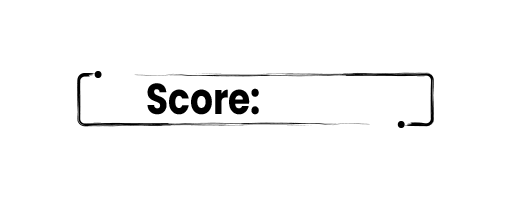
<style>
.page{position:relative;width:519px;height:199px;background:#ffffff}
.page>*{position:absolute;margin:0}
.t1{font:43.2px "Poppins-Bold";color:#000000;scale:0.83 1}
</style>
<div class="page">
<p class="t1" style="left:147px;top:83px;width:112px;height:32px">Score:</p>
</div>
